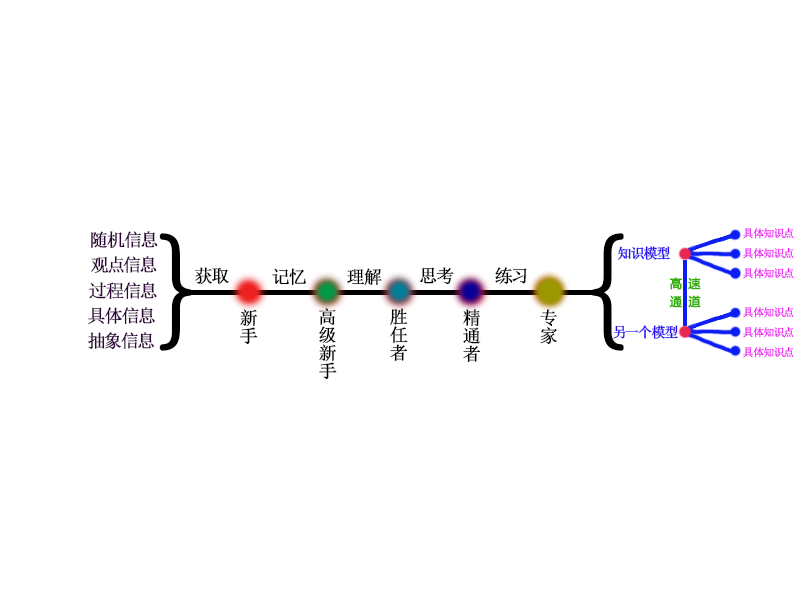
<style>
.page{position:relative;width:800px;height:600px;background:#ffffff}
.page>*{position:absolute;margin:0}
.t1{font:18px "SimSun";color:#2f063c;font-weight:bold}
.t2{font:129px "SimSun";color:#000000;font-weight:bold}
.t3{font:11px "SimSun";color:#ec0cf4;font-weight:bold}
.t4{font:14px "SimSun";color:#260bf1;font-weight:bold}
.t5{font:18px "SimSun";color:#000000;font-weight:bold}
.t6{font:12px/18px "MicrosoftYaHei";letter-spacing:0.1em;color:#32ae06;font-weight:bold}
.t7{font:18px/18px "SimSun";letter-spacing:-0.1em;color:#000000;font-weight:bold}
</style>
<div class="page">
<p class="t1" style="left:91px;top:231px;width:67px;height:17px">随机信息</p>
<p class="t2" style="left:159px;top:233px;width:33px;height:118px">}</p>
<p class="t2" style="left:592px;top:233px;width:32px;height:118px">{</p>
<p class="t3" style="left:743px;top:227px;width:51px;height:12px">具体知识点</p>
<p class="t4" style="left:617px;top:246px;width:53px;height:14px">知识模型</p>
<p class="t1" style="left:91px;top:256px;width:66px;height:17px">观点信息</p>
<p class="t3" style="left:743px;top:247px;width:51px;height:12px">具体知识点</p>
<p class="t5" style="left:195px;top:267px;width:34px;height:17px">获取</p>
<p class="t5" style="left:272px;top:268px;width:34px;height:17px">记忆</p>
<p class="t5" style="left:347px;top:268px;width:35px;height:17px">理解</p>
<p class="t5" style="left:420px;top:267px;width:34px;height:18px">思考</p>
<p class="t5" style="left:495px;top:267px;width:32px;height:17px">练习</p>
<p class="t3" style="left:743px;top:267px;width:51px;height:12px">具体知识点</p>
<p class="t6" style="left:669px;top:277px;width:32px;height:31px">高 速<br>通 道</p>
<p class="t1" style="left:89px;top:282px;width:68px;height:17px">过程信息</p>
<p class="t1" style="left:88px;top:307px;width:67px;height:18px">具体信息</p>
<p class="t7" style="left:240px;top:309px;width:18px;height:36px">新<br>手</p>
<p class="t7" style="left:319px;top:308px;width:18px;height:72px">高<br>级<br>新<br>手</p>
<p class="t7" style="left:390px;top:308px;width:18px;height:53px">胜<br>任<br>者</p>
<p class="t7" style="left:463px;top:309px;width:18px;height:53px">精<br>通<br>者</p>
<p class="t7" style="left:540px;top:309px;width:17px;height:36px">专<br>家</p>
<p class="t3" style="left:743px;top:306px;width:51px;height:12px">具体知识点</p>
<p class="t4" style="left:613px;top:325px;width:65px;height:14px">另一个模型</p>
<p class="t3" style="left:743px;top:326px;width:51px;height:12px">具体知识点</p>
<p class="t1" style="left:88px;top:332px;width:66px;height:18px">抽象信息</p>
<p class="t3" style="left:743px;top:346px;width:51px;height:12px">具体知识点</p>
</div>
